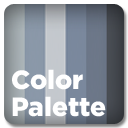
<style>
.page{position:relative;width:128px;height:128px}
.page>*{position:absolute;margin:0}
.t1{font:26.4px/26.4px "Gotham-Black";color:#ffffff}
</style>
<div class="page">
<p class="t1" style="left:12px;top:69px;width:94px;height:48px">Color<br>Palette</p>
</div>
